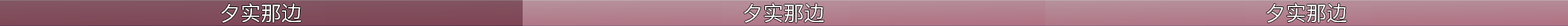
<style>
.page{position:relative;width:1568px;height:26px}
.page>*{position:absolute;margin:0}
.t1{font:20.6px "SourceHanSansSC-Normal";color:#ffffff}
</style>
<div class="page">
<p class="t1" style="left:221px;top:3px;width:80px;height:20px">夕实那边</p>
<p class="t1" style="left:743px;top:3px;width:81px;height:20px">夕实那边</p>
<p class="t1" style="left:1266px;top:3px;width:81px;height:20px">夕实那边</p>
</div>
